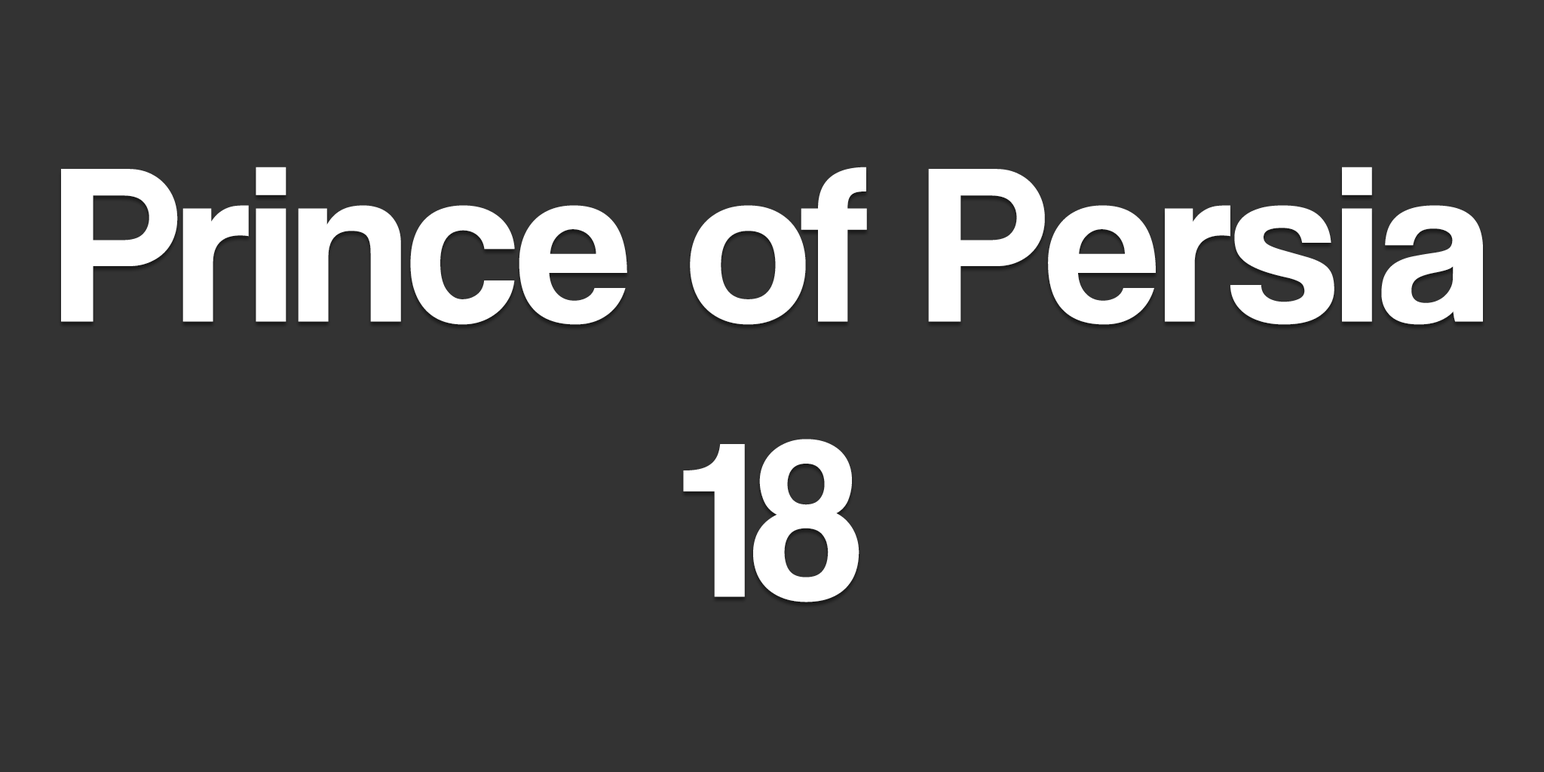
<style>
.page{position:relative;width:1544px;height:772px;background:#333333}
.page>*{position:absolute;margin:0}
.t1{font:229.4px "CoolveticaRg-Regular";color:#ffffff}
</style>
<div class="page">
<p class="t1" style="left:61px;top:167px;width:1422px;height:435px;text-align:center">Prince of Persia<br>18</p>
</div>
